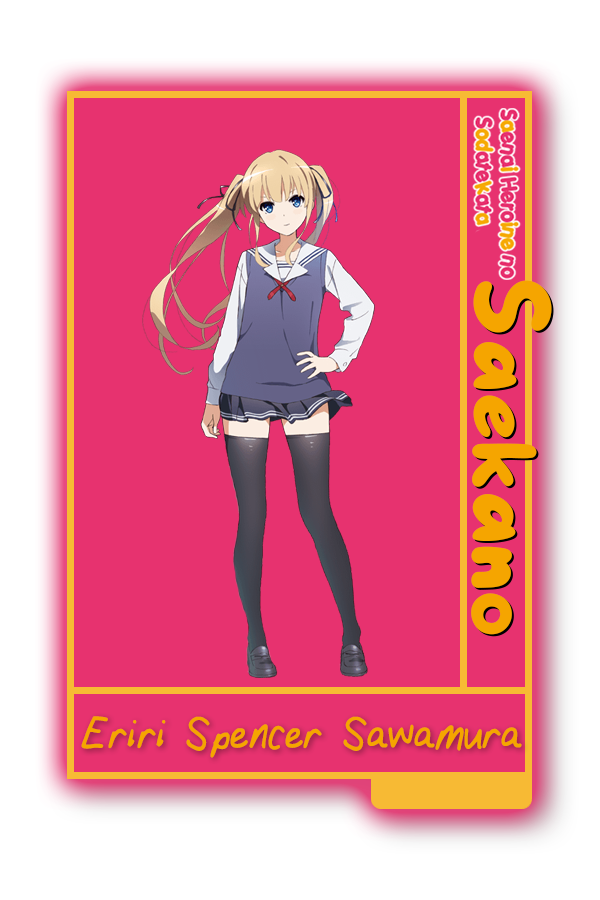
<style>
.page{position:relative;width:600px;height:900px;background:#e7326f}
.page>*{position:absolute;margin:0}
.t1{font:109.9px "Go-Mocha";color:#f5a500;scale:1.04 1}
.t2{font:54.9px "Girly_handwriting";color:#f5a500;scale:0.89 1}
</style>
<div class="page">
<p class="t1" style="left:471px;top:280px;width:81px;height:355px;rotate:91deg">Saekano</p>
<p class="t2" style="left:81px;top:716px;width:441px;height:42px">Eriri Spencer Sawamura</p>
</div>
